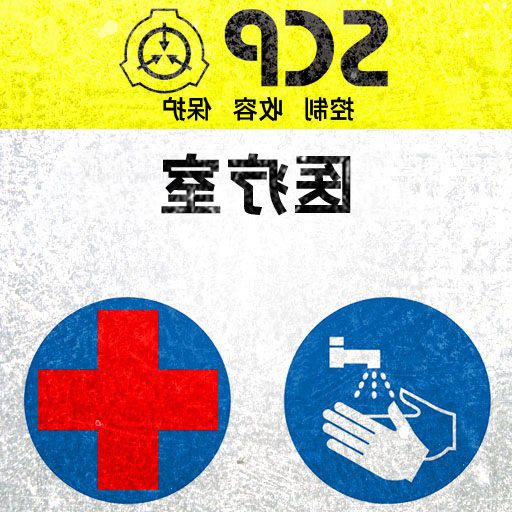
<style>
.page{position:relative;width:512px;height:512px}
.page>*{position:absolute;margin:0}
.t1{font:26.1px "AlibabaPuHuiTiM";color:#000000}
.t2{font:68.2px "AlibabaPuHuiTiB";color:#131313}
</style>
<div class="page">
<p class="t1" style="left:163px;top:96px;width:191px;height:26px;rotate:180deg">控制   收容   保护</p>
<p class="t2" style="left:161px;top:153px;width:190px;height:63px;rotate:180deg">医疗室</p>
</div>
